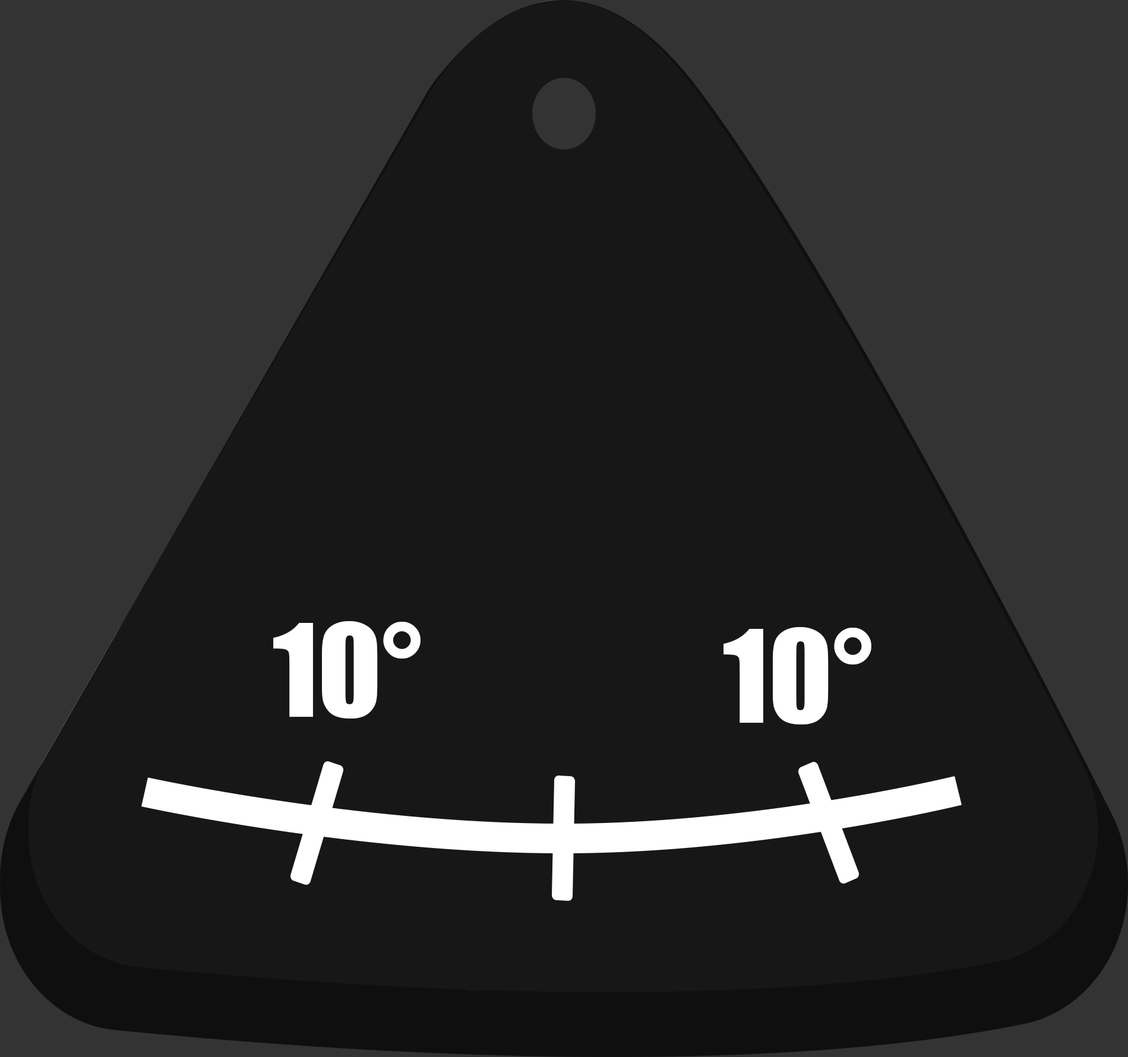
<style>
.page{position:relative;width:1128px;height:1057px;background:#181717}
.page>*{position:absolute;margin:0}
.t1{font:118.8px "Impact";color:#ffffff}
</style>
<div class="page">
<p class="t1" style="left:273px;top:621px;width:148px;height:98px">10°</p>
<p class="t1" style="left:723px;top:627px;width:148px;height:98px">10°</p>
</div>
